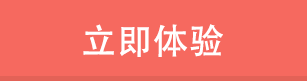
<style>
.page{position:relative;width:307px;height:81px;background:#f6695f}
.page>*{position:absolute;margin:0}
.t1{font:35px "STHeiti";letter-spacing:0.029em;color:#ffffff}
</style>
<div class="page">
<p class="t1" style="left:83px;top:24px;width:140px;height:33px">立即体验</p>
</div>
